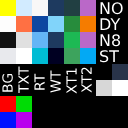
<style>
.page{position:relative;width:128px;height:128px;background:#000000}
.page>*{position:absolute;margin:0}
.t1{font:16px "DejaVuSans";color:#ffffff}
.t2{font:14px "DejaVuSans";color:#ffffff}
</style>
<div class="page">
<p class="t1" style="left:100px;top:2px;width:23px;height:13px">NO</p>
<p class="t1" style="left:100px;top:18px;width:21px;height:12px">DY</p>
<p class="t1" style="left:100px;top:34px;width:21px;height:13px">N8</p>
<p class="t1" style="left:100px;top:50px;width:19px;height:13px">ST</p>
<p class="t2" style="left:2px;top:73px;width:11px;height:19px;rotate:-90deg">BG</p>
<p class="t2" style="left:18px;top:66px;width:11px;height:28px;rotate:-90deg">TXT</p>
<p class="t2" style="left:34px;top:73px;width:11px;height:17px;rotate:-90deg">RT</p>
<p class="t2" style="left:50px;top:70px;width:11px;height:23px;rotate:-90deg">WT</p>
<p class="t2" style="left:66px;top:68px;width:11px;height:26px;rotate:-90deg">XT1</p>
<p class="t2" style="left:81px;top:67px;width:11px;height:26px;rotate:-90deg">XT2</p>
</div>
